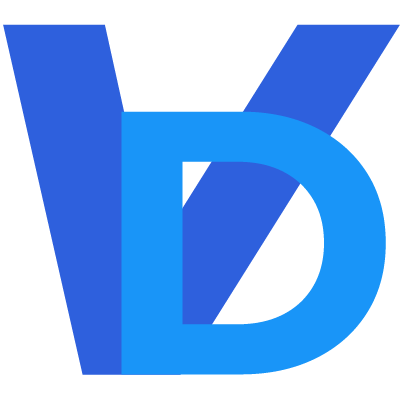
<style>
.page{position:relative;width:400px;height:400px;background:#ffffff}
.page>*{position:absolute;margin:0}
.t1{font:500px "Montserrat-ExtraBoldItalic";color:#2f60dd}
.t2{font:375px "Montserrat-Bold";color:#1996f9}
</style>
<div class="page">
<p class="t1" style="left:3px;top:24px;width:397px;height:351px">V</p>
<p class="t2" style="left:121px;top:111px;width:265px;height:264px">D</p>
</div>
